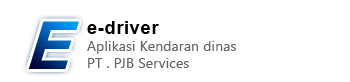
<style>
.page{position:relative;width:350px;height:82px;background:#ffffff}
.page>*{position:absolute;margin:0}
.t1{font:88.9px "Tunga-Bold";letter-spacing:0.075em;scale:0.96 1}
.t2{font:27.8px "BrowalliaUPC-Bold";letter-spacing:0.025em;color:#000000}
.t3{font:13.6px "SegoeUI";letter-spacing:0.025em;color:#666666}
</style>
<div class="page">
<p class="t1" style="left:28px;top:21px;width:51px;height:48px">E</p>
<p class="t2" style="left:87px;top:21px;width:72px;height:13px">e-driver</p>
<p class="t3" style="left:87px;top:41px;width:149px;height:13px">Aplikasi Kendaran dinas</p>
<p class="t3" style="left:88px;top:58px;width:101px;height:10px">PT . PJB Services</p>
</div>
